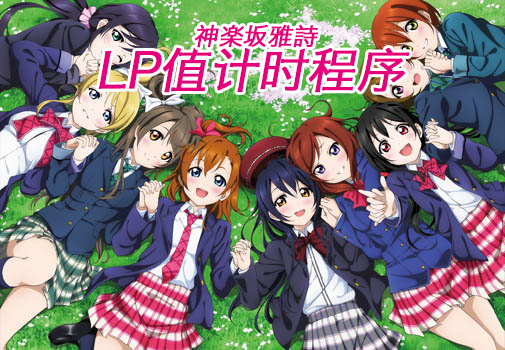
<style>
.page{position:relative;width:505px;height:350px}
.page>*{position:absolute;margin:0}
.t1{font:24px "HiraginoSansGB-W3";color:#e7007b;font-weight:bold;font-style:italic}
.t2{font:48px "HiraginoSansGB-W3";color:#e7007b;font-weight:bold;font-style:italic}
</style>
<div class="page">
<p class="t1" style="left:194px;top:24px;width:125px;height:24px">神楽坂雅詩</p>
<p class="t2" style="left:98px;top:47px;width:312px;height:46px">LP值计时程序</p>
</div>
